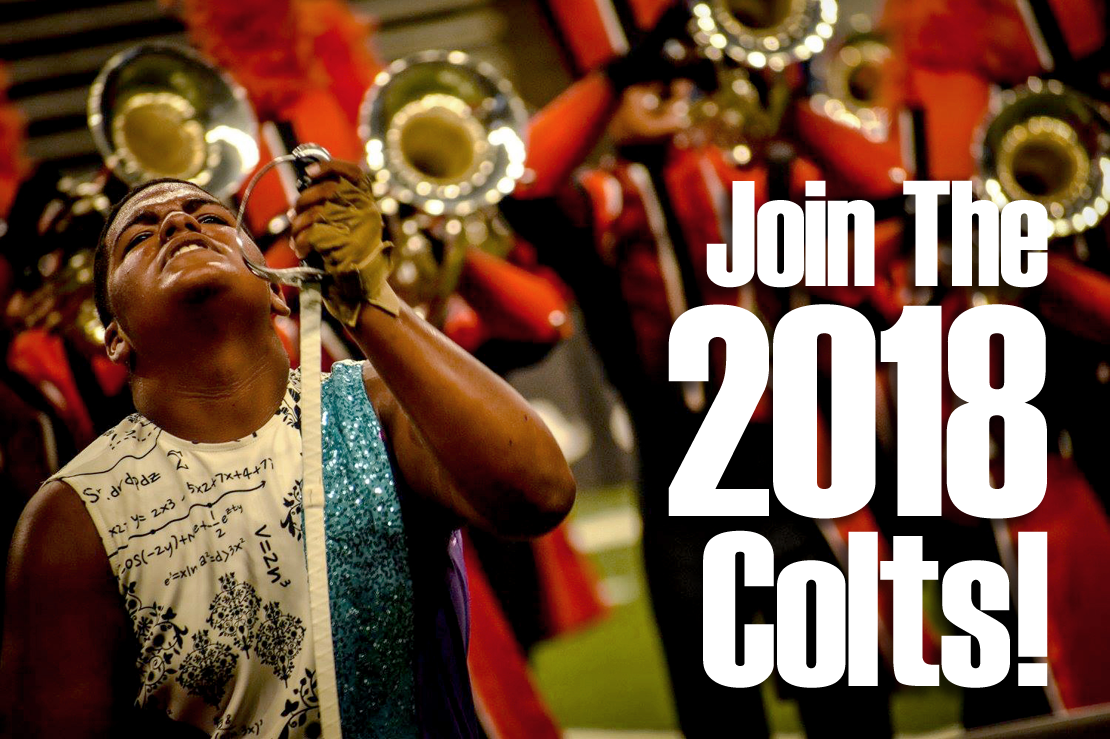
<style>
.page{position:relative;width:1110px;height:739px}
.page>*{position:absolute;margin:0}
.t1{font:150px/60px "Haettenschweiler";color:#ffffff;scale:0.95 1}
.t2{font:300px/230px "Haettenschweiler";color:#ffffff;scale:0.95 1}
.t3{font:220px/170px "Haettenschweiler";color:#ffffff;scale:0.95 1}
</style>
<div class="page">
<p class="t1" style="left:668px;top:180px;width:380px;height:508px;text-align:right">Join The<br><span class="t2">2018<br></span><span class="t3">Colts!</span></p>
</div>
